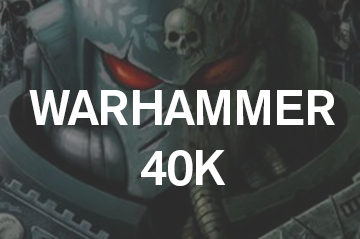
<style>
.page{position:relative;width:360px;height:239px}
.page>*{position:absolute;margin:0}
.t1{font:50px "AkzidenzGroteskBE-Md";letter-spacing:-0.05em;color:#ffffff}
</style>
<div class="page">
<p class="t1" style="left:29px;top:90px;width:306px;height:96px;text-align:center">WARHAMMER<br>40K</p>
</div>
